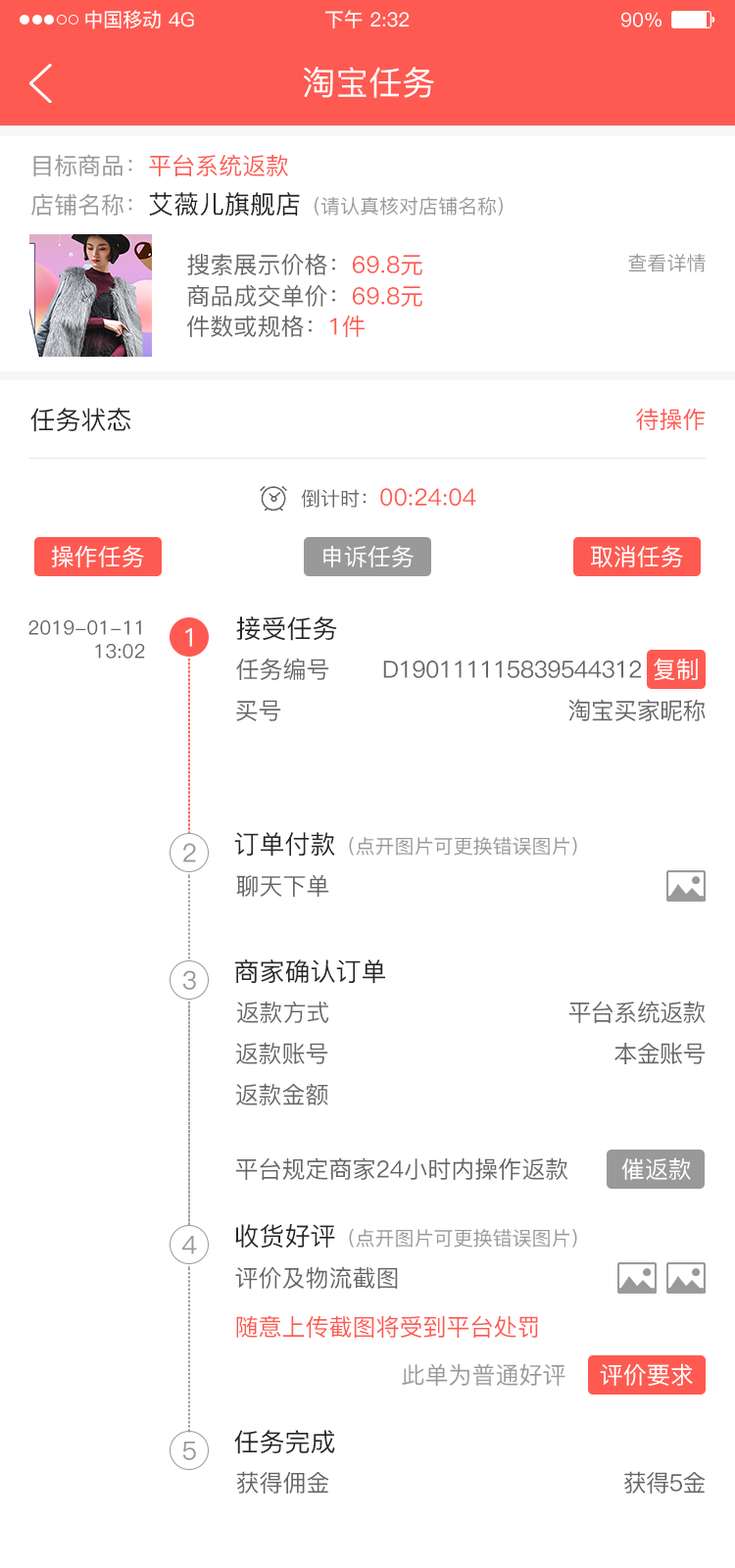
<style>
.page{position:relative;width:735px;height:1568px;background:#ffffff}
.page>*{position:absolute;margin:0}
.t1{font:19.6px "PingFang-SC-Medium";color:#ffffff}
.t2{font:33.3px "PingFang-SC-Medium";color:#ffffff}
.t3{font:23.5px "PingFang-SC-Medium";color:#fe5a51}
.t4{font:23.5px "PingFang-SC-Medium";color:#999999}
.t5{font:19.6px "PingFang-SC-Medium";color:#999999}
.t6{font:25.5px "PingFang-SC-Medium";color:#262626}
.t7{font:23.5px "PingFang-SC-Medium";color:#666666}
.t8{font:19.6px "PingFang-SC-Medium";color:#666666}
.t9{font:23.5px "PingFang-SC-Medium";color:#ffffff}
.t10{font:19.6px/23.5px "PingFang-SC-Medium";color:#666666}
.t11{font:25.5px "PingFang-SC-Medium";color:#ffffff}
.t12{font:23.5px "PingFang-SC-Medium";letter-spacing:-0.025em;color:#666666}
.t13{font:25.5px "PingFang-SC-Medium";color:#999999}
</style>
<div class="page">
<p class="t1" style="left:85px;top:10px;width:76px;height:19px">中国移动</p>
<p class="t1" style="left:169px;top:12px;width:25px;height:15px">4G</p>
<p class="t1" style="left:324px;top:10px;width:86px;height:19px">下午 2:32</p>
<p class="t1" style="left:621px;top:12px;width:41px;height:15px">90%</p>
<p class="t2" style="left:303px;top:67px;width:131px;height:31px">淘宝任务</p>
<p class="t3" style="left:33px;top:154px;width:255px;height:22px"><span class="t4">目标商品：</span>平台系统返款</p>
<p class="t5" style="left:31px;top:192px;width:472px;height:25px"><span class="t4">店铺名称：</span><span class="t6">艾薇儿旗舰店</span>（请认真核对店铺名称）</p>
<p class="t7" style="left:187px;top:254px;width:235px;height:21px">搜索展示价格：<span class="t3">69.8元</span></p>
<p class="t5" style="left:628px;top:254px;width:78px;height:18px">查看详情</p>
<p class="t7" style="left:187px;top:284px;width:235px;height:23px">商品成交单价：<span class="t3">69.8元</span></p>
<p class="t7" style="left:187px;top:315px;width:178px;height:22px">件数或规格：<span class="t3">1件</span></p>
<p class="t6" style="left:30px;top:408px;width:101px;height:24px">任务状态</p>
<p class="t3" style="left:636px;top:408px;width:70px;height:22px">待操作</p>
<p class="t3" style="left:301px;top:488px;width:175px;height:20px"><span class="t8">倒计时：</span>00:24:04</p>
<p class="t9" style="left:51px;top:545px;width:93px;height:22px">操作任务</p>
<p class="t9" style="left:323px;top:545px;width:91px;height:22px">申诉任务</p>
<p class="t9" style="left:591px;top:545px;width:92px;height:22px">取消任务</p>
<p class="t6" style="left:236px;top:616px;width:101px;height:25px">接受任务</p>
<p class="t10" style="left:28px;top:620px;width:117px;height:39px;text-align:right">2019-01-11<br>13:02</p>
<p class="t11" style="left:185px;top:628px;width:7px;height:19px">1</p>
<p class="t7" style="left:236px;top:658px;width:93px;height:22px">任务编号</p>
<p class="t12" style="left:383px;top:661px;width:258px;height:17px">D190111115839544312</p>
<p class="t9" style="left:654px;top:658px;width:44px;height:22px">复制</p>
<p class="t7" style="left:236px;top:700px;width:45px;height:21px">买号</p>
<p class="t12" style="left:568px;top:699px;width:138px;height:22px">淘宝买家昵称</p>
<p class="t5" style="left:234px;top:832px;width:343px;height:25px"><span class="t6">订单付款</span>（点开图片可更换错误图片）</p>
<p class="t13" style="left:183px;top:843px;width:13px;height:19px">2</p>
<p class="t7" style="left:236px;top:874px;width:93px;height:23px">聊天下单</p>
<p class="t6" style="left:235px;top:959px;width:150px;height:25px">商家确认订单</p>
<p class="t13" style="left:182px;top:970px;width:14px;height:20px">3</p>
<p class="t7" style="left:237px;top:1001px;width:92px;height:22px">返款方式</p>
<p class="t12" style="left:568px;top:1001px;width:138px;height:22px">平台系统返款</p>
<p class="t7" style="left:236px;top:1042px;width:92px;height:22px">返款账号</p>
<p class="t12" style="left:614px;top:1043px;width:92px;height:21px">本金账号</p>
<p class="t7" style="left:236px;top:1083px;width:92px;height:22px">返款金额</p>
<p class="t7" style="left:235px;top:1157px;width:333px;height:23px">平台规定商家24小时内操作返款</p>
<p class="t9" style="left:621px;top:1157px;width:70px;height:23px">催返款</p>
<p class="t5" style="left:235px;top:1224px;width:342px;height:25px"><span class="t6">收货好评</span>（点开图片可更换错误图片）</p>
<p class="t13" style="left:182px;top:1236px;width:15px;height:18px">4</p>
<p class="t7" style="left:235px;top:1266px;width:163px;height:23px">评价及物流截图</p>
<p class="t3" style="left:236px;top:1315px;width:302px;height:23px">随意上传截图将受到平台处罚</p>
<p class="t4" style="left:402px;top:1363px;width:163px;height:23px">此单为普通好评</p>
<p class="t9" style="left:600px;top:1363px;width:93px;height:23px">评价要求</p>
<p class="t6" style="left:234px;top:1430px;width:101px;height:24px">任务完成</p>
<p class="t13" style="left:182px;top:1442px;width:14px;height:18px">5</p>
<p class="t7" style="left:236px;top:1471px;width:93px;height:23px">获得佣金</p>
<p class="t12" style="left:624px;top:1471px;width:82px;height:23px">获得5金</p>
</div>
